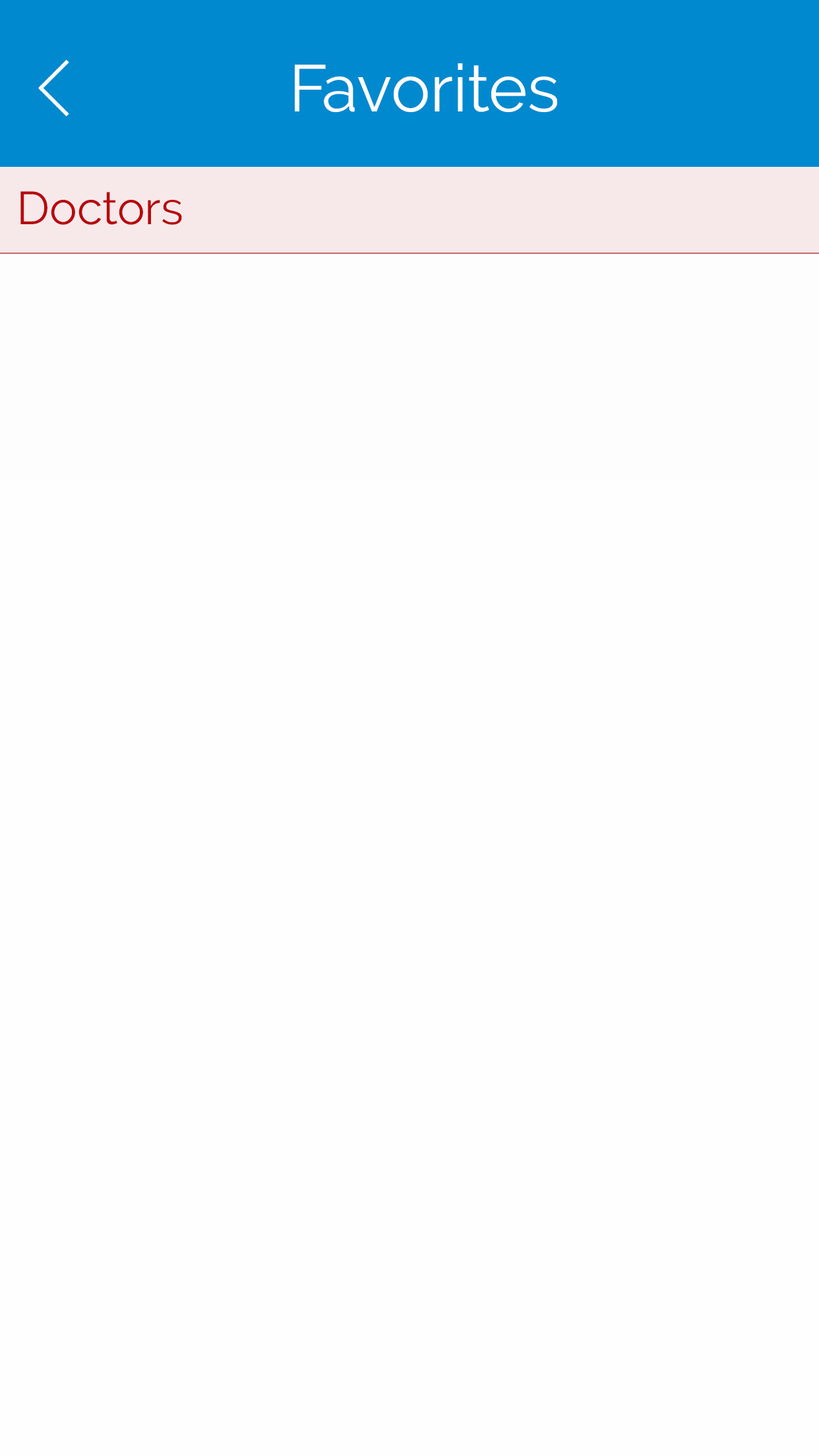
<style>
.page{position:relative;width:819px;height:1456px;background:#fefefe}
.page>*{position:absolute;margin:0}
.t1{font:65.9px "Raleway-Regular";color:#fdfeff}
.t2{font:46.2px "Raleway-Regular";color:#b70309}
</style>
<div class="page">
<p class="t1" style="left:295px;top:63px;width:262px;height:49px">Favorites</p>
<p class="t2" style="left:20px;top:191px;width:162px;height:34px">Doctors</p>
</div>
